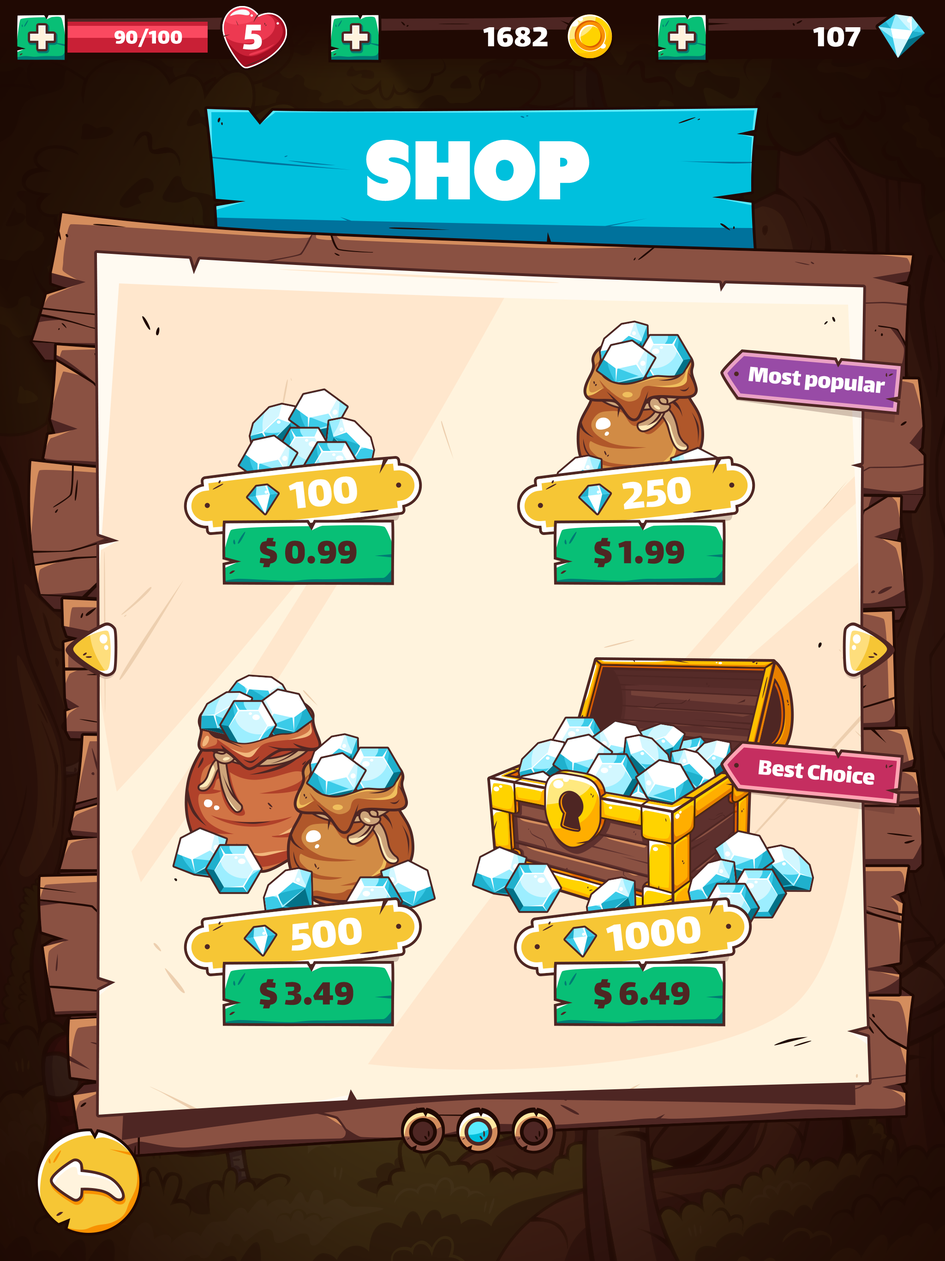
<style>
.page{position:relative;width:945px;height:1261px}
.page>*{position:absolute;margin:0}
.t1{font:57.2px "Lalezar-Regular";color:#fff3dd}
.t2{font:22.2px "Lalezar-Regular";color:#ffffff}
.t3{font:42.5px "Lalezar-Regular";color:#ffffff}
.t4{font:33.2px "Lalezar-Regular";color:#ffffff}
.t5{font:83.1px "Tondu-Beta";color:#ffffff;text-transform:uppercase}
.t6{font:24.9px "Lalezar-Regular";color:#ffffff}
.t7{font:46.2px "Lalezar-Regular";color:#ffffff}
.t8{font:38.8px "Lalezar-Regular";color:#4e2623}
</style>
<div class="page">
<p class="t1" style="left:30px;top:25px;width:24px;height:24px">+</p>
<p class="t2" style="left:114px;top:29px;width:68px;height:18px">90/100</p>
<p class="t3" style="left:243px;top:24px;width:19px;height:26px">5</p>
<p class="t1" style="left:344px;top:25px;width:24px;height:24px">+</p>
<p class="t4" style="left:483px;top:27px;width:65px;height:20px">1682</p>
<p class="t1" style="left:670px;top:25px;width:24px;height:24px">+</p>
<p class="t4" style="left:813px;top:27px;width:48px;height:20px">107</p>
<p class="t5" style="left:366px;top:140px;width:224px;height:61px">shop</p>
<p class="t6" style="left:749px;top:367px;width:137px;height:26px;rotate:5deg">Most popular</p>
<p class="t7" style="left:289px;top:476px;width:68px;height:33px;rotate:-6deg">100</p>
<p class="t7" style="left:622px;top:477px;width:69px;height:33px;rotate:-6deg">250</p>
<p class="t8" style="left:259px;top:538px;width:98px;height:29px">$ 0.99</p>
<p class="t8" style="left:594px;top:538px;width:91px;height:29px">$ 1.99</p>
<p class="t6" style="left:758px;top:760px;width:117px;height:25px;rotate:5deg">Best Choice</p>
<p class="t7" style="left:292px;top:918px;width:70px;height:33px;rotate:-6deg">500</p>
<p class="t7" style="left:606px;top:916px;width:95px;height:35px;rotate:-6deg">1000</p>
<p class="t8" style="left:259px;top:979px;width:95px;height:30px">$ 3.49</p>
<p class="t8" style="left:594px;top:979px;width:96px;height:30px">$ 6.49</p>
</div>
